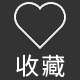
<style>
.page{position:relative;width:80px;height:80px;background:#333333}
.page>*{position:absolute;margin:0}
.t1{font:24px "NotoSansSC-Regular";letter-spacing:0.18em;color:#ffffff}
</style>
<div class="page">
<p class="t1" style="left:16px;top:54px;width:49px;height:23px">收藏</p>
</div>
